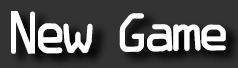
<style>
.page{position:relative;width:238px;height:68px;background:#333333}
.page>*{position:absolute;margin:0}
.t1{font:60px "OCRAExtended";letter-spacing:-0.15em;color:#ffffff}
</style>
<div class="page">
<p class="t1" style="left:11px;top:11px;width:215px;height:43px">New Game</p>
</div>
